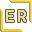
<style>
.page{position:relative;width:32px;height:32px;background:#ffffff}
.page>*{position:absolute;margin:0}
.t1{font:16px "RobotoMono-Bold";letter-spacing:0.1em;color:#f0db8a}
</style>
<div class="page">
<p class="t1" style="left:6px;top:10px;width:20px;height:12px">ER</p>
</div>
